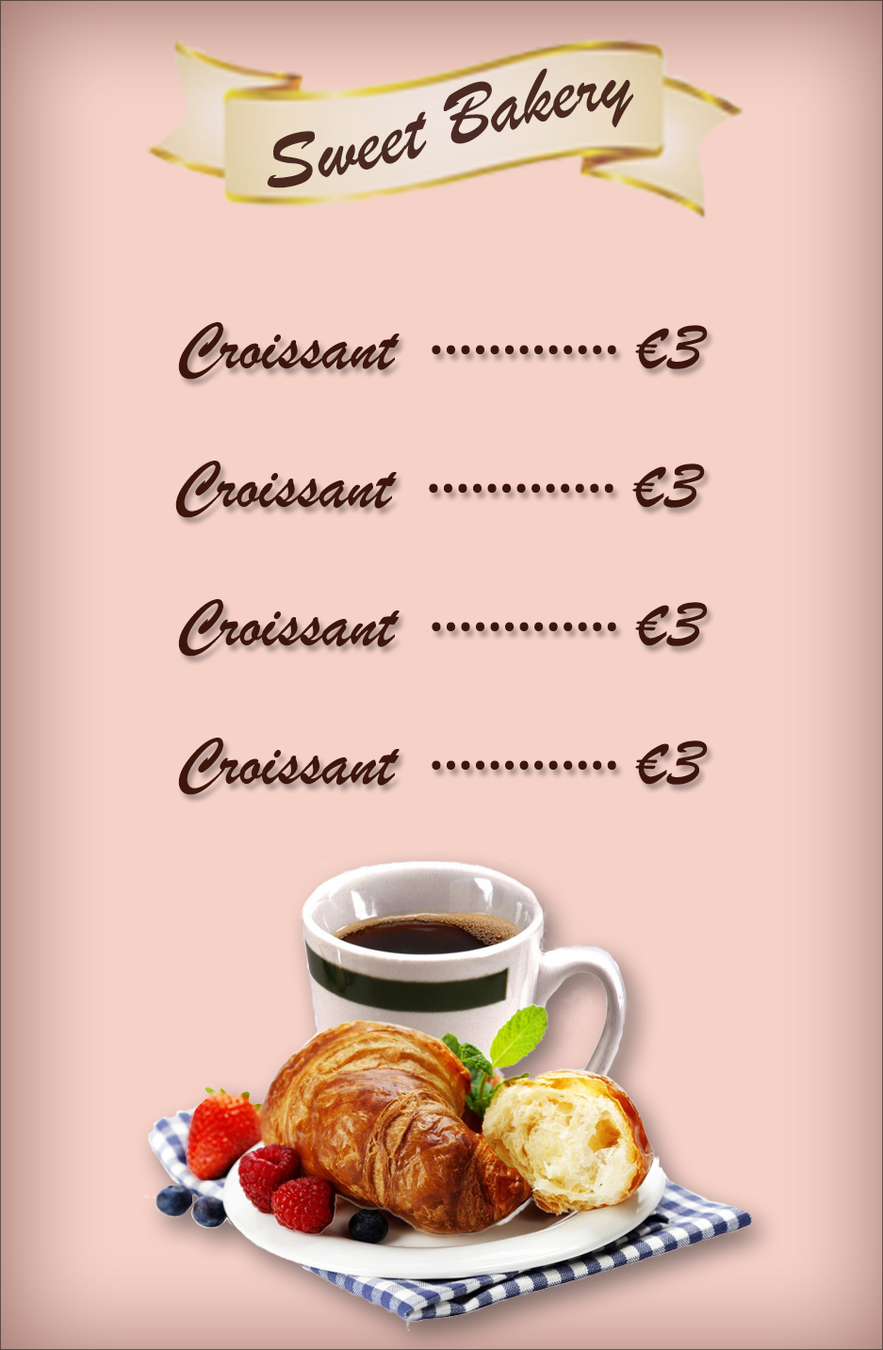
<style>
.page{position:relative;width:883px;height:1350px;background:#f6d1c8}
.page>*{position:absolute;margin:0}
.t1{font:82.8px "BrushScriptMT";color:#3d150b}
.t2{font:70.7px "MyriadPro-Regular";color:#3d150b}
.t3{font:70.7px "BrushScriptMT";color:#3d150b}
</style>
<div class="page">
<p class="t1" style="left:267px;top:68px;width:367px;height:120px;rotate:-12deg;opacity:0.95">Sweet Bakery</p>
<p class="t2" style="left:178px;top:322px;width:530px;height:58px"><span class="t3">  Croissant </span> ············· <span class="t3">€3</span></p>
<p class="t2" style="left:175px;top:461px;width:530px;height:57px"><span class="t3">  Croissant </span> ············· <span class="t3">€3</span></p>
<p class="t2" style="left:178px;top:599px;width:530px;height:58px"><span class="t3">  Croissant </span> ············· <span class="t3">€3</span></p>
<p class="t2" style="left:178px;top:738px;width:530px;height:57px"><span class="t3">  Croissant </span> ············· <span class="t3">€3</span></p>
</div>
